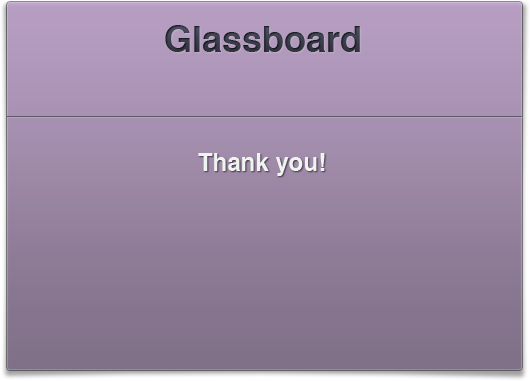
<style>
.page{position:relative;width:530px;height:381px}
.page>*{position:absolute;margin:0}
.t1{font:36px "Helvetica-Bold";color:#31343f}
.t2{font:24px "Helvetica-Bold";color:#f8fff9}
</style>
<div class="page">
<p class="t1" style="left:165px;top:25px;width:195px;height:27px">Glassboard</p>
<p class="t2" style="left:198px;top:153px;width:127px;height:23px;opacity:0.9">Thank you!</p>
</div>
